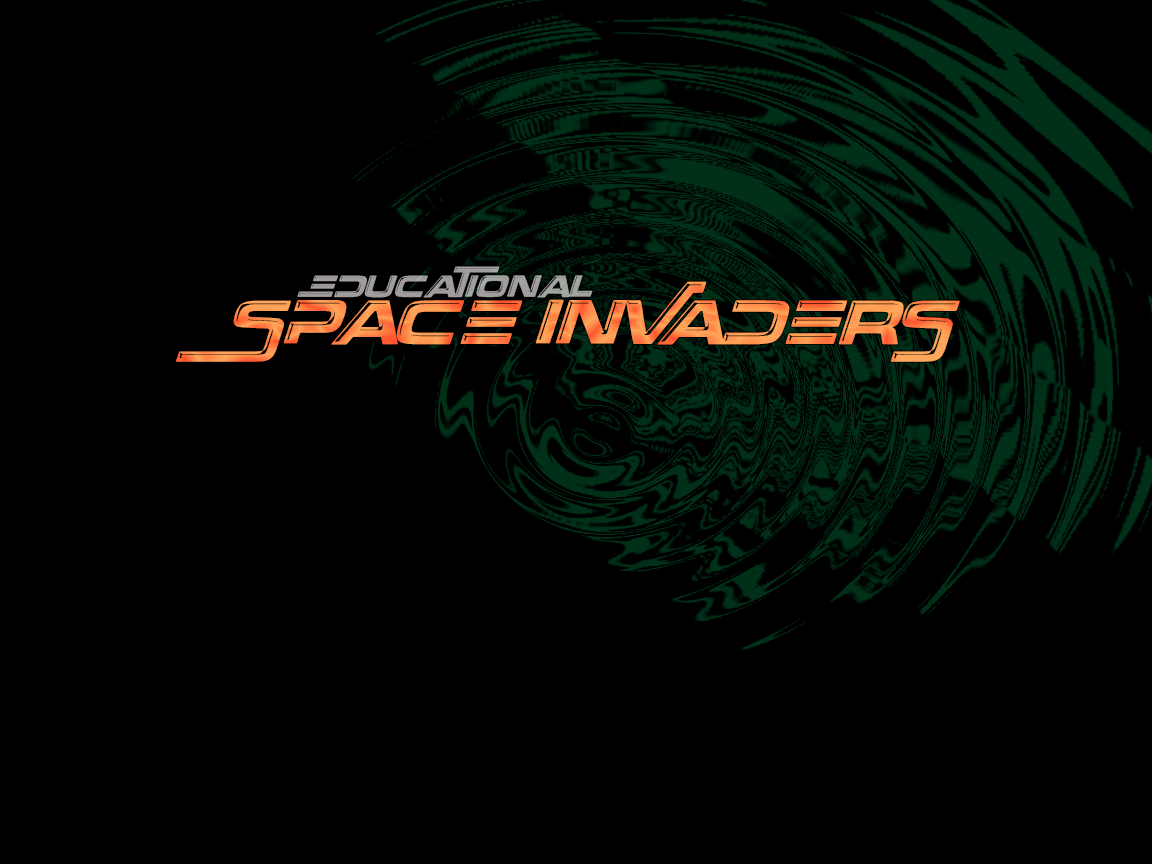
<style>
.page{position:relative;width:1152px;height:864px;background:#000000}
.page>*{position:absolute;margin:0}
.t1{font:22.1px "OverThere";color:#a29d9d}
.t2{font:45.4px "OverThere";color:#ff914e}
</style>
<div class="page">
<p class="t1" style="left:297px;top:266px;width:296px;height:32px">Educational</p>
<p class="t2" style="left:176px;top:281px;width:784px;height:81px">Space Invaders</p>
</div>
